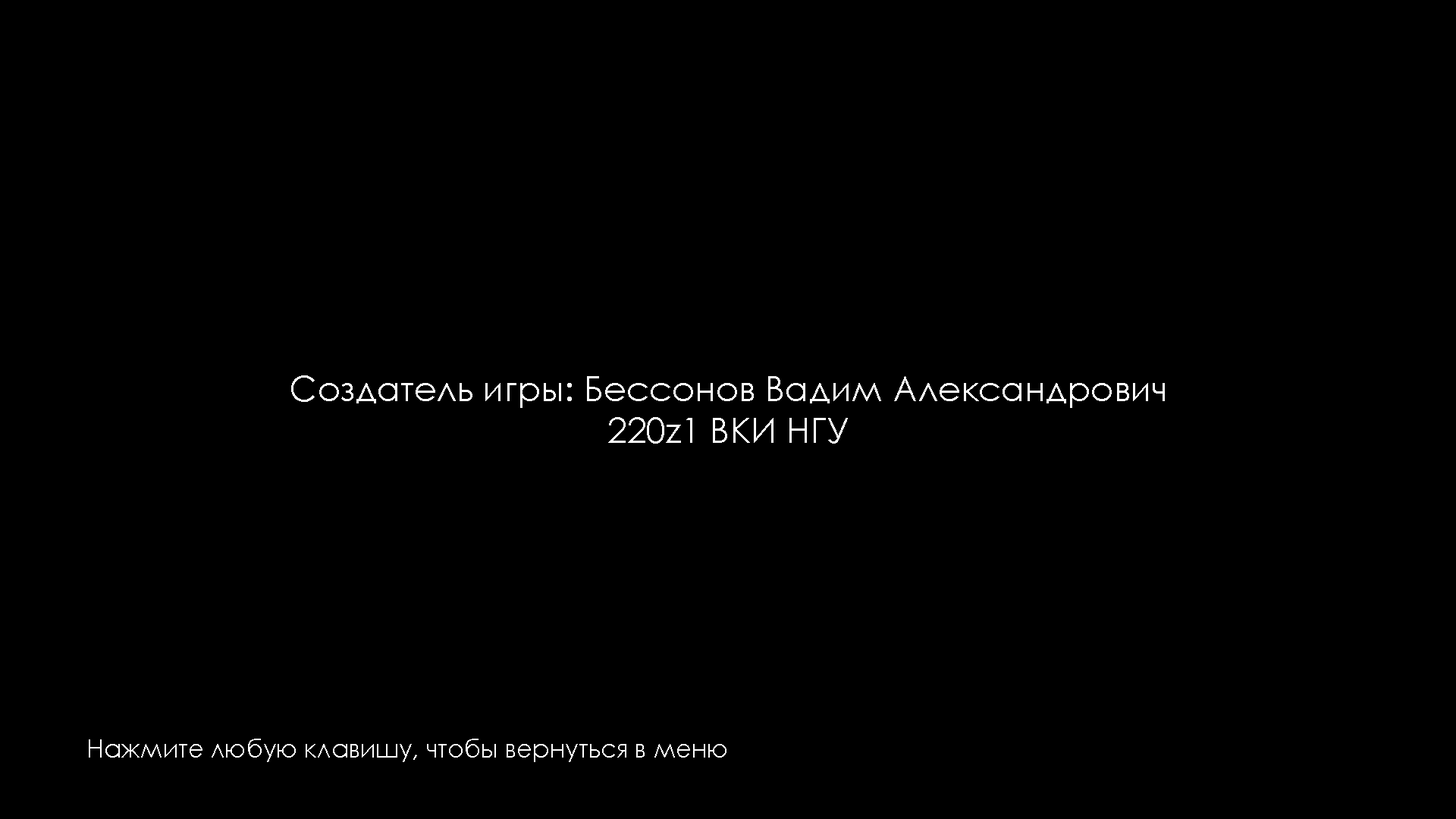
<style>
.page{position:relative;width:1456px;height:819px;background:#000000}
.page>*{position:absolute;margin:0}
.t1{font:34.8px "CenturyGothic";letter-spacing:0.005em;color:#ffffff}
.t2{font:25.3px "CenturyGothic";letter-spacing:0.005em;color:#ffffff}
</style>
<div class="page">
<p class="t1" style="left:291px;top:375px;width:874px;height:69px;text-align:center">Создатель игры: Бессонов Вадим Александрович<br>220z1 ВКИ НГУ</p>
<p class="t2" style="left:89px;top:739px;width:637px;height:23px">Нажмите любую клавишу, чтобы вернуться в меню</p>
</div>
